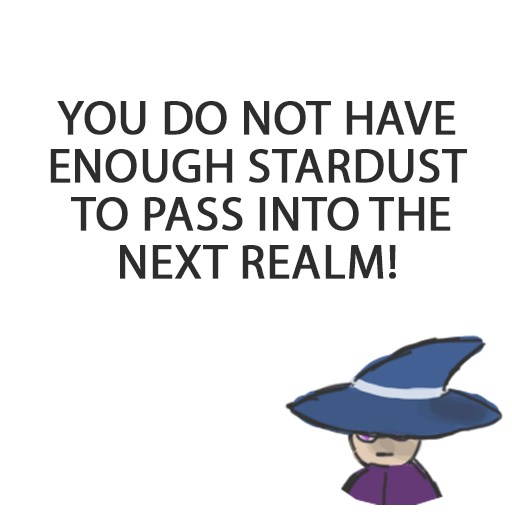
<style>
.page{position:relative;width:512px;height:512px;background:#ffffff}
.page>*{position:absolute;margin:0}
.t1{font:48px/48px "MyriadPro-Regular";color:#2d2d2d;text-transform:uppercase;font-weight:bold}
</style>
<div class="page">
<p class="t1" style="left:50px;top:101px;width:417px;height:178px;text-align:center">You do not have <br>enough stardust<br> to pass into the <br>next realm!</p>
</div>
